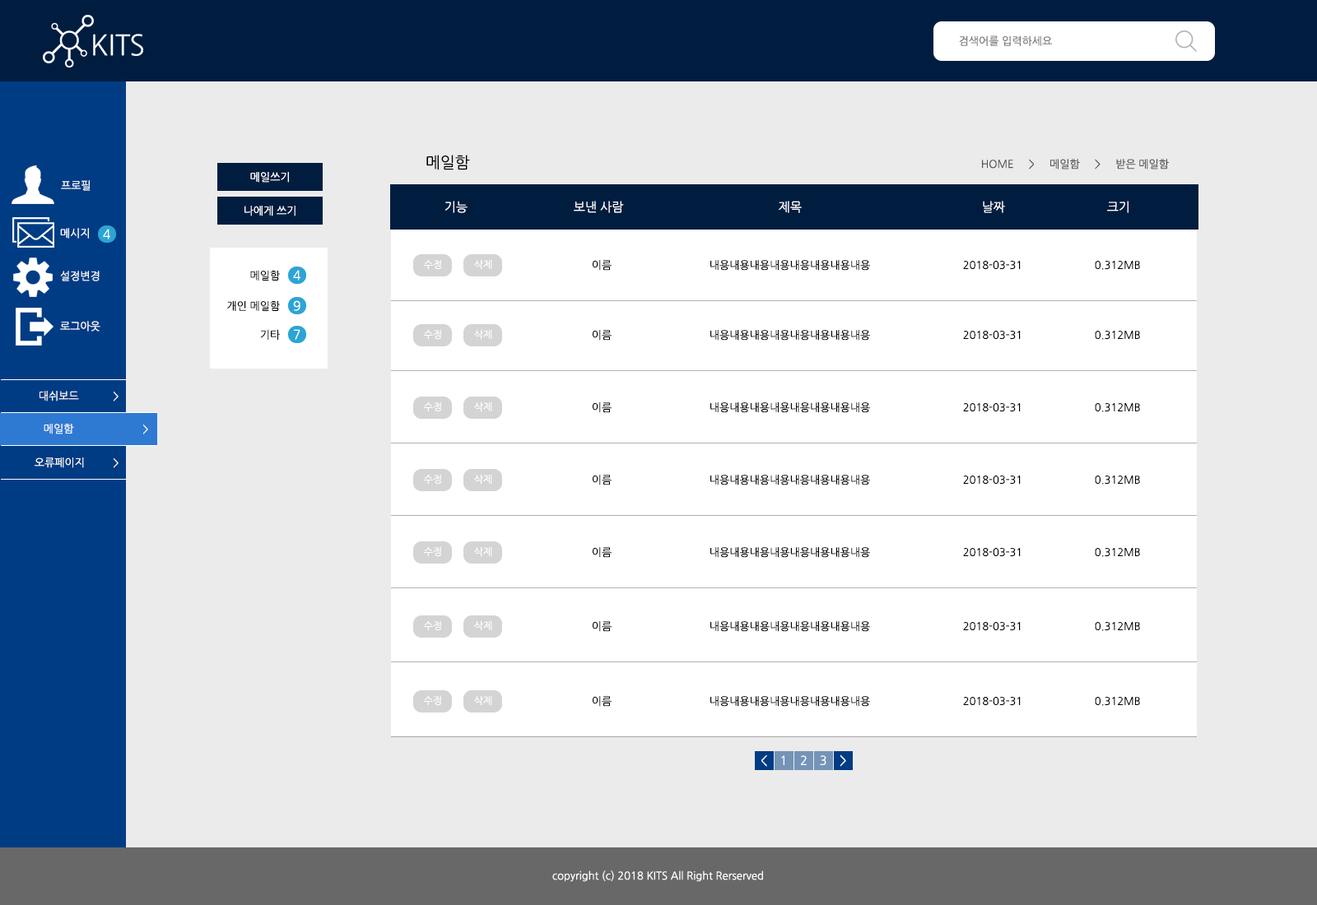
<style>
.page{position:relative;width:1317px;height:905px;background:#ebebeb}
.page>*{position:absolute;margin:0}
.t1{font:10.7px "NanumGothic";color:#737373}
.t2{font:15.6px "NanumGothic";color:#000000}
.t3{font:10.7px "NanumGothic";color:#505050}
.t4{font:10.7px "NanumGothic";color:#ffffff}
.t5{font:12.3px "NanumGothic";color:#ffffff}
.t6{font:12.8px "NanumGothic";color:#ffffff}
.t7{font:10.7px "NanumGothic";color:#000000}
.t8{font:9.9px "NanumGothic";color:#ffffff}
</style>
<div class="page">
<p class="t1" style="left:959px;top:35px;width:93px;height:11px">검색어를 입력하세요</p>
<p class="t2" style="left:426px;top:155px;width:44px;height:15px">메일함</p>
<p class="t3" style="left:982px;top:159px;width:187px;height:11px">HOME     &gt;     메일함     &gt;     받은 메일함</p>
<p class="t4" style="left:250px;top:172px;width:39px;height:11px">메일쓰기</p>
<p class="t4" style="left:61px;top:180px;width:30px;height:11px">프로필</p>
<p class="t4" style="left:244px;top:206px;width:51px;height:10px">나에게 쓰기</p>
<p class="t5" style="left:445px;top:201px;width:23px;height:12px">기능</p>
<p class="t5" style="left:574px;top:201px;width:50px;height:12px">보낸 사람</p>
<p class="t5" style="left:779px;top:201px;width:23px;height:12px">제목</p>
<p class="t5" style="left:983px;top:201px;width:22px;height:12px">날짜</p>
<p class="t5" style="left:1107px;top:201px;width:21px;height:12px">크기</p>
<p class="t4" style="left:60px;top:228px;width:29px;height:11px">메시지</p>
<p class="t6" style="left:103px;top:229px;width:7px;height:11px">4</p>
<p class="t7" style="left:250px;top:270px;width:30px;height:11px">메일함</p>
<p class="t6" style="left:293px;top:270px;width:7px;height:11px">4</p>
<p class="t8" style="left:424px;top:259px;width:17px;height:11px">수정</p>
<p class="t8" style="left:474px;top:259px;width:18px;height:11px">삭제</p>
<p class="t7" style="left:592px;top:260px;width:20px;height:11px">이름</p>
<p class="t7" style="left:710px;top:260px;width:160px;height:11px">내용내용내용내용내용내용내용내용</p>
<p class="t7" style="left:963px;top:261px;width:58px;height:9px">2018-03-31</p>
<p class="t7" style="left:1095px;top:261px;width:45px;height:9px">0.312MB</p>
<p class="t4" style="left:60px;top:271px;width:40px;height:11px">설정변경</p>
<p class="t7" style="left:227px;top:300px;width:53px;height:11px">개인 메일함</p>
<p class="t6" style="left:293px;top:300px;width:7px;height:11px">9</p>
<p class="t4" style="left:60px;top:321px;width:40px;height:11px">로그아웃</p>
<p class="t7" style="left:260px;top:329px;width:20px;height:11px">기타</p>
<p class="t6" style="left:294px;top:329px;width:6px;height:11px">7</p>
<p class="t8" style="left:424px;top:329px;width:17px;height:11px">수정</p>
<p class="t8" style="left:474px;top:329px;width:18px;height:11px">삭제</p>
<p class="t7" style="left:592px;top:330px;width:20px;height:11px">이름</p>
<p class="t7" style="left:710px;top:330px;width:160px;height:11px">내용내용내용내용내용내용내용내용</p>
<p class="t7" style="left:963px;top:331px;width:58px;height:9px">2018-03-31</p>
<p class="t7" style="left:1095px;top:331px;width:45px;height:9px">0.312MB</p>
<p class="t4" style="left:40px;top:391px;width:39px;height:11px">대쉬보드</p>
<p class="t4" style="left:114px;top:391px;width:5px;height:11px">&gt;</p>
<p class="t8" style="left:424px;top:402px;width:17px;height:10px">수정</p>
<p class="t8" style="left:474px;top:402px;width:18px;height:10px">삭제</p>
<p class="t7" style="left:592px;top:403px;width:20px;height:10px">이름</p>
<p class="t7" style="left:710px;top:403px;width:160px;height:10px">내용내용내용내용내용내용내용내용</p>
<p class="t7" style="left:963px;top:403px;width:58px;height:9px">2018-03-31</p>
<p class="t7" style="left:1095px;top:403px;width:45px;height:9px">0.312MB</p>
<p class="t4" style="left:44px;top:424px;width:30px;height:11px">메일함</p>
<p class="t4" style="left:143px;top:424px;width:5px;height:11px">&gt;</p>
<p class="t4" style="left:35px;top:458px;width:49px;height:10px">오류페이지</p>
<p class="t4" style="left:114px;top:458px;width:5px;height:10px">&gt;</p>
<p class="t8" style="left:424px;top:474px;width:17px;height:11px">수정</p>
<p class="t8" style="left:474px;top:474px;width:18px;height:11px">삭제</p>
<p class="t7" style="left:592px;top:475px;width:20px;height:11px">이름</p>
<p class="t7" style="left:710px;top:475px;width:160px;height:11px">내용내용내용내용내용내용내용내용</p>
<p class="t7" style="left:963px;top:476px;width:58px;height:9px">2018-03-31</p>
<p class="t7" style="left:1095px;top:476px;width:45px;height:9px">0.312MB</p>
<p class="t8" style="left:424px;top:547px;width:17px;height:10px">수정</p>
<p class="t8" style="left:474px;top:547px;width:18px;height:10px">삭제</p>
<p class="t7" style="left:592px;top:547px;width:20px;height:11px">이름</p>
<p class="t7" style="left:710px;top:547px;width:160px;height:11px">내용내용내용내용내용내용내용내용</p>
<p class="t7" style="left:963px;top:548px;width:58px;height:9px">2018-03-31</p>
<p class="t7" style="left:1095px;top:548px;width:45px;height:9px">0.312MB</p>
<p class="t8" style="left:424px;top:621px;width:17px;height:10px">수정</p>
<p class="t8" style="left:474px;top:621px;width:18px;height:10px">삭제</p>
<p class="t7" style="left:592px;top:621px;width:20px;height:11px">이름</p>
<p class="t7" style="left:710px;top:621px;width:160px;height:11px">내용내용내용내용내용내용내용내용</p>
<p class="t7" style="left:963px;top:622px;width:58px;height:9px">2018-03-31</p>
<p class="t7" style="left:1095px;top:622px;width:45px;height:9px">0.312MB</p>
<p class="t8" style="left:424px;top:696px;width:17px;height:10px">수정</p>
<p class="t8" style="left:474px;top:696px;width:18px;height:10px">삭제</p>
<p class="t7" style="left:592px;top:696px;width:20px;height:11px">이름</p>
<p class="t7" style="left:710px;top:696px;width:160px;height:11px">내용내용내용내용내용내용내용내용</p>
<p class="t7" style="left:963px;top:697px;width:58px;height:9px">2018-03-31</p>
<p class="t7" style="left:1095px;top:697px;width:45px;height:9px">0.312MB</p>
<p class="t5" style="left:761px;top:755px;width:6px;height:12px">&lt;</p>
<p class="t5" style="left:781px;top:756px;width:3px;height:9px">1</p>
<p class="t5" style="left:801px;top:756px;width:6px;height:9px">2</p>
<p class="t5" style="left:820px;top:756px;width:6px;height:9px">3</p>
<p class="t5" style="left:840px;top:755px;width:6px;height:12px">&gt;</p>
<p class="t4" style="left:552px;top:871px;width:211px;height:11px">copyright (c) 2018 KITS All Right Rerserved</p>
</div>
